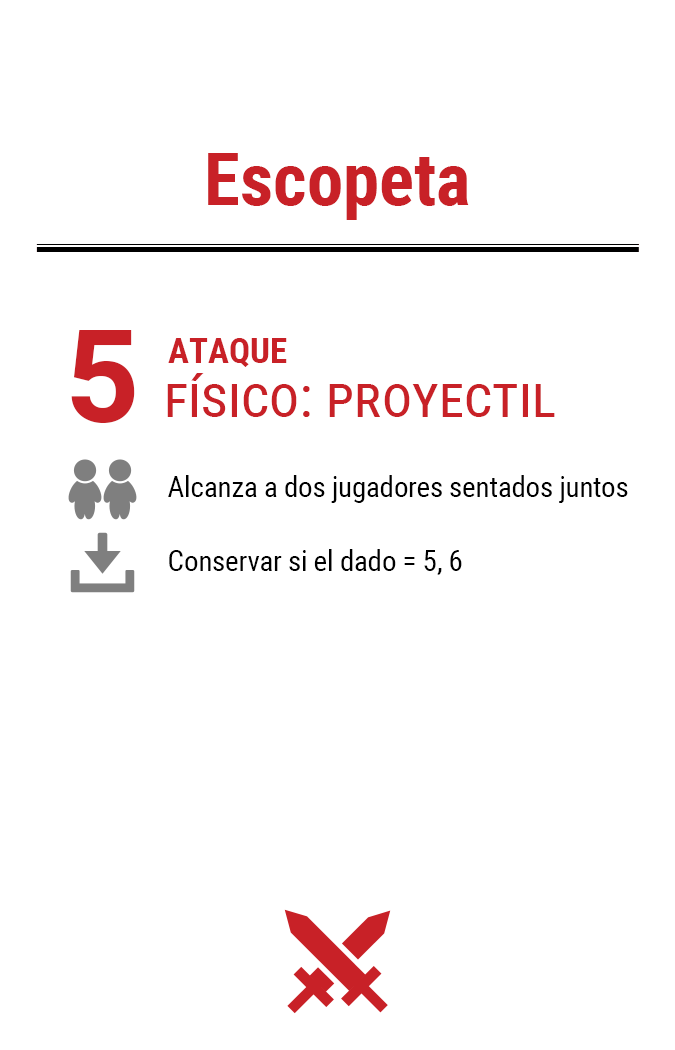
<style>
.page{position:relative;width:675px;height:1050px;background:#ffffff}
.page>*{position:absolute;margin:0}
.t1{font:72.9px "RobotoCondensed-Bold";color:#c82127}
.t2{font:130px "Roboto-Bold";letter-spacing:-0.06em;color:#c82127}
.t3{font:35px "RobotoCondensed-Bold";color:#c82127}
.t4{font:58.3px "RobotoCondensed-Regular";color:#c82127;font-variant:small-caps}
.t5{font:29.2px "RobotoCondensed-Regular";letter-spacing:-0.01em;color:#000000}
</style>
<div class="page">
<p class="t1" style="left:208px;top:153px;width:261px;height:67px">Escopeta</p>
<p class="t2" style="left:71px;top:330px;width:64px;height:93px">5</p>
<p class="t3" style="left:168px;top:338px;width:119px;height:29px">ATAQUE</p>
<p class="t4" style="left:167px;top:373px;width:388px;height:44px">físico: proyectil</p>
<p class="t5" style="left:168px;top:475px;width:460px;height:28px">Alcanza a dos jugadores sentados juntos</p>
<p class="t5" style="left:169px;top:549px;width:293px;height:26px">Conservar si el dado = 5, 6</p>
</div>
